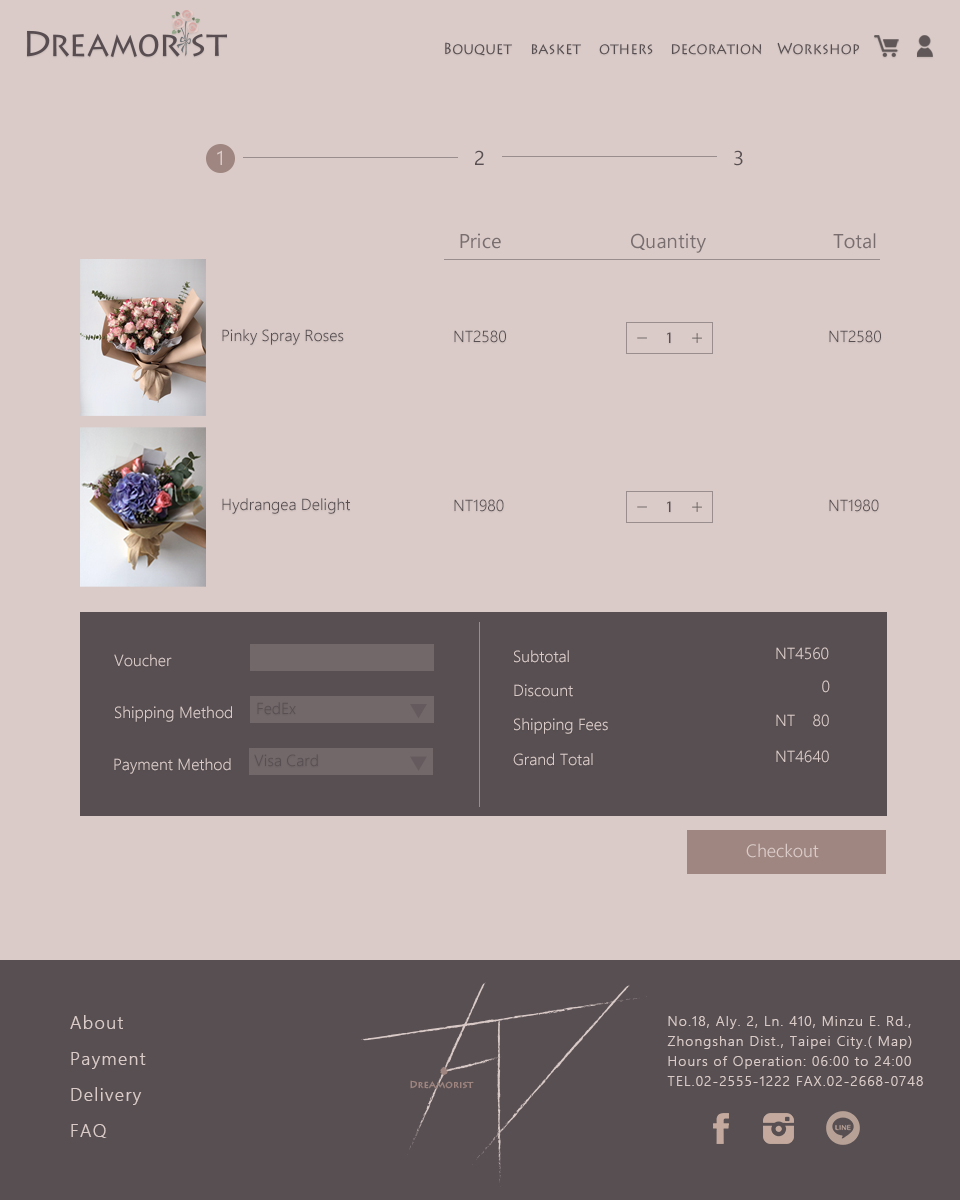
<style>
.page{position:relative;width:960px;height:1200px;background:#dacbc8}
.page>*{position:absolute;margin:0}
.t1{font:16px "LithosPro-Regular";color:#584f52;scale:0.9 1}
.t2{font:16px "LithosPro-Regular";color:#584f52}
.t3{font:20px "LeelawadeeUI";color:#dacbc8}
.t4{font:20px "LeelawadeeUI";color:#584f52}
.t5{font:20px "LeelawadeeUI";color:#786e6f}
.t6{font:16px "LeelawadeeUI-Semilight";color:#584f52}
.t7{font:16px "MyriadPro-Regular";color:#584f52}
.t8{font:16px "LeelawadeeUI-Semilight";color:#dacbc8}
.t9{font:18px "LeelawadeeUI-Semilight";color:#dacbc8}
.t10{font:18px/36px "LeelawadeeUI-Semilight";letter-spacing:0.075em;color:#dacbc8}
.t11{font:14px/20px "LeelawadeeUI-Semilight";letter-spacing:0.075em;color:#dacbc8}
</style>
<div class="page">
<p class="t1" style="left:445px;top:42px;width:67px;height:14px">Bouquet<br><span class="t2">Ha</span></p>
<p class="t1" style="left:532px;top:44px;width:49px;height:11px">basket<br><span class="t2">Ha</span></p>
<p class="t1" style="left:599px;top:44px;width:54px;height:11px">others<br><span class="t2">Ha</span></p>
<p class="t1" style="left:672px;top:43px;width:89px;height:12px">decoration<br><span class="t2">Ha</span></p>
<p class="t1" style="left:777px;top:42px;width:82px;height:13px">Workshop<br><span class="t2">Ha</span></p>
<p class="t3" style="left:217px;top:150px;width:5px;height:15px">1</p>
<p class="t4" style="left:475px;top:150px;width:9px;height:15px">2</p>
<p class="t4" style="left:734px;top:150px;width:9px;height:16px">3</p>
<p class="t5" style="left:460px;top:233px;width:41px;height:16px">Price</p>
<p class="t5" style="left:631px;top:233px;width:75px;height:20px">Quantity</p>
<p class="t5" style="left:833px;top:233px;width:43px;height:16px">Total</p>
<p class="t6" style="left:222px;top:329px;width:122px;height:16px">Pinky Spray Roses</p>
<p class="t6" style="left:454px;top:330px;width:52px;height:13px">NT2580</p>
<p class="t7" style="left:667px;top:332px;width:4px;height:11px">1</p>
<p class="t6" style="left:829px;top:330px;width:52px;height:13px">NT2580</p>
<p class="t6" style="left:222px;top:498px;width:128px;height:16px">Hydrangea Delight</p>
<p class="t6" style="left:454px;top:499px;width:50px;height:13px">NT1980</p>
<p class="t7" style="left:667px;top:501px;width:4px;height:11px">1</p>
<p class="t6" style="left:829px;top:499px;width:50px;height:13px">NT1980</p>
<p class="t8" style="left:114px;top:654px;width:58px;height:13px">Voucher</p>
<p class="t8" style="left:514px;top:650px;width:55px;height:13px">Subtotal</p>
<p class="t8" style="left:776px;top:647px;width:53px;height:13px">NT4560</p>
<p class="t8" style="left:514px;top:684px;width:59px;height:13px">Discount</p>
<p class="t8" style="left:822px;top:680px;width:8px;height:13px">0</p>
<p class="t6" style="left:257px;top:702px;width:39px;height:13px">FedEx</p>
<p class="t8" style="left:115px;top:706px;width:117px;height:16px">Shipping Method</p>
<p class="t8" style="left:514px;top:718px;width:94px;height:16px">Shipping Fees</p>
<p class="t8" style="left:776px;top:714px;width:53px;height:13px">NT    80</p>
<p class="t8" style="left:776px;top:750px;width:53px;height:13px">NT4640</p>
<p class="t8" style="left:114px;top:758px;width:117px;height:16px">Payment Method</p>
<p class="t6" style="left:254px;top:754px;width:64px;height:13px">Visa Card</p>
<p class="t8" style="left:513px;top:753px;width:80px;height:13px">Grand Total</p>
<p class="t9" style="left:746px;top:843px;width:73px;height:15px">Checkout</p>
<p class="t10" style="left:70px;top:1015px;width:76px;height:123px">About<br>Payment<br>Delivery<br>FAQ</p>
<p class="t11" style="left:667px;top:1016px;width:256px;height:70px">No.18, Aly. 2, Ln. 410, Minzu E. Rd., Zhongshan Dist., Taipei City.( Map) <br>Hours of Operation: 06:00 to 24:00 <br>TEL.02-2555-1222 FAX.02-2668-0748</p>
</div>
